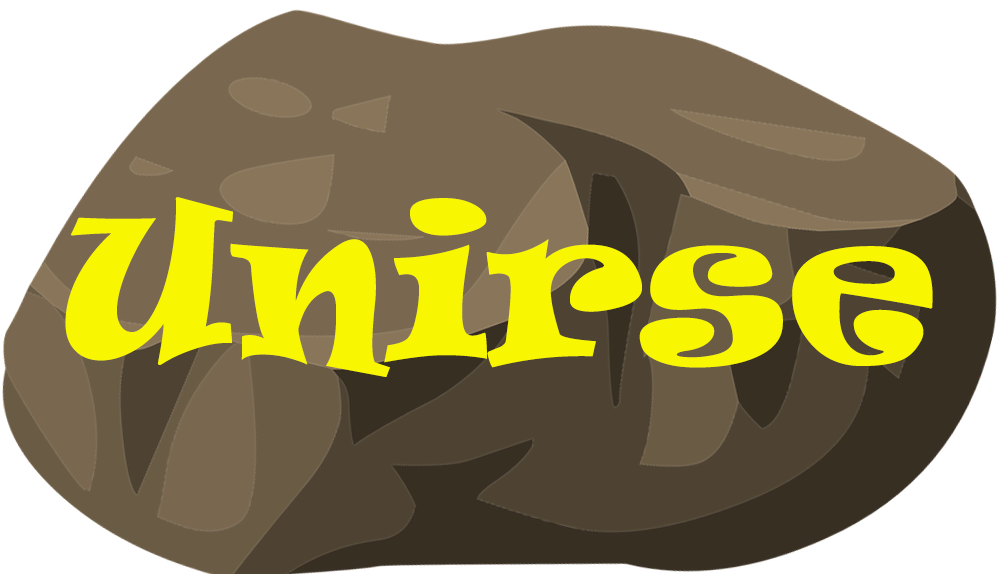
<style>
.page{position:relative;width:999px;height:574px;background:#79674f}
.page>*{position:absolute;margin:0}
.t1{font:200px "Ravie";color:#f8f600}
</style>
<div class="page">
<p class="t1" style="left:65px;top:197px;width:868px;height:180px">Unirse</p>
</div>
